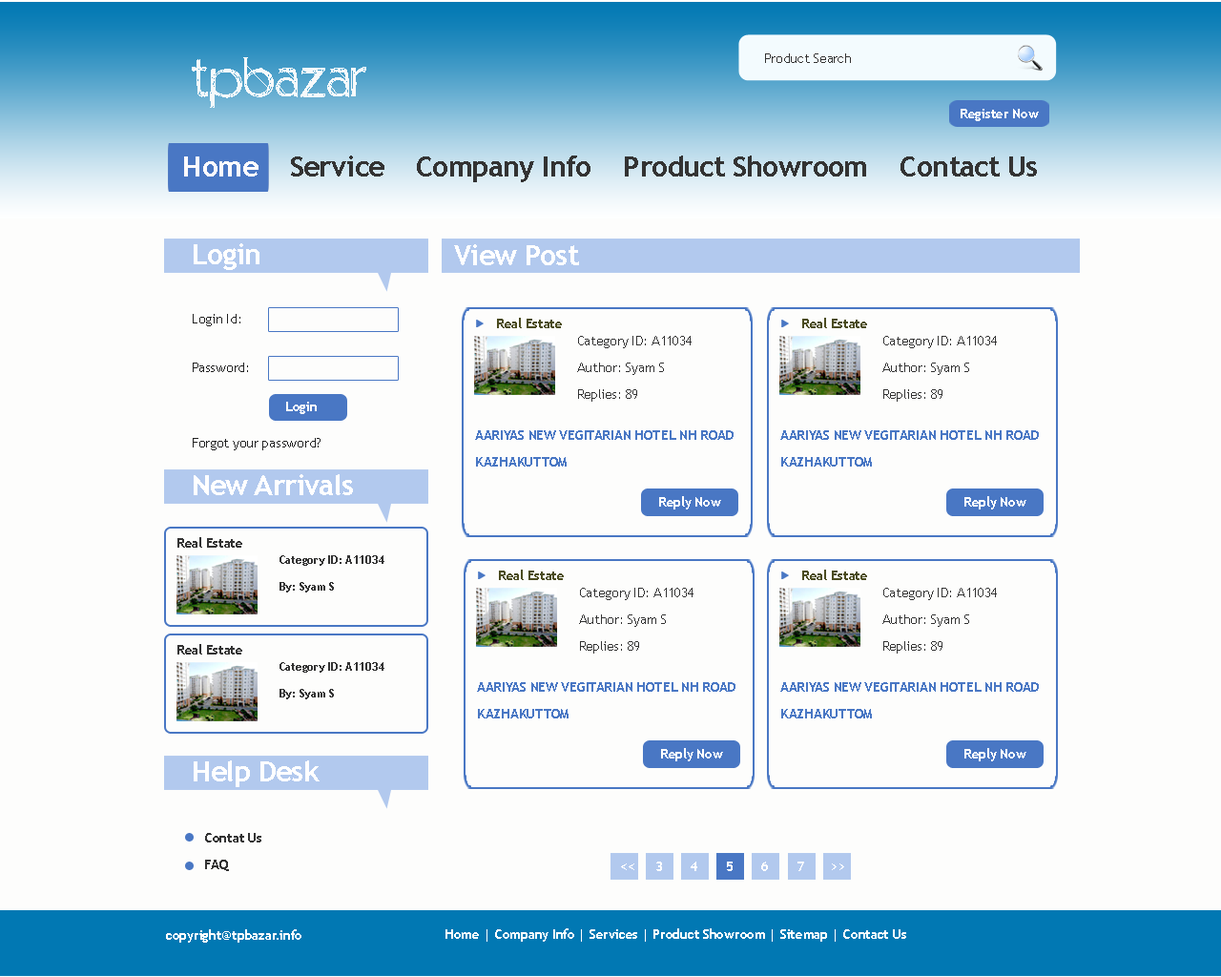
<style>
.page{position:relative;width:1221px;height:977px;background:#fdfdfc}
.page>*{position:absolute;margin:0}
.t1{font:13.4px "TrebuchetMS";letter-spacing:-0.02em;color:#333333}
.t2{font:68.7px "Positiv-A";letter-spacing:-0.02em;color:#f7f9fa}
.t3{font:13.4px "TrebuchetMS-Bold";letter-spacing:-0.02em;color:#ffffff}
.t4{font:28.6px "TrebuchetMS-Bold";letter-spacing:-0.02em;color:#333333}
.t5{font:28.6px "TrebuchetMS-Bold";letter-spacing:-0.02em;color:#fdfafc}
.t6{font:28.6px "TrebuchetMS-Bold";letter-spacing:-0.02em;color:#ffffff}
.t7{font:13.4px "TrebuchetMS";letter-spacing:-0.02em;color:#212121}
.t8{font:13.4px "TrebuchetMS-Bold";letter-spacing:-0.02em;color:#4b4c20}
.t9{font:13.4px/26.7px "TrebuchetMS";letter-spacing:-0.02em;color:#333333}
.t10{font:13.4px "TrebuchetMS-Bold";letter-spacing:-0.02em;color:#fefdfd}
.t11{font:13.4px/26.7px "TrebuchetMS-Bold";letter-spacing:-0.02em;color:#4977c4}
.t12{font:13.4px "TrebuchetMS-Bold";letter-spacing:-0.02em;color:#333333}
.t13{font:11.4px/26.7px "TrebuchetMS-Bold";letter-spacing:-0.02em;color:#333333}
.t14{font:13.4px/26.7px "TrebuchetMS-Bold";letter-spacing:-0.02em;color:#333333}
</style>
<div class="page">
<p class="t1" style="left:765px;top:53px;width:86px;height:10px">Product Search</p>
<p class="t2" style="left:192px;top:57px;width:174px;height:51px">tpbazar</p>
<p class="t3" style="left:960px;top:109px;width:79px;height:12px">Register Now</p>
<p class="t4" style="left:184px;top:155px;width:853px;height:27px"><span class="t5">Home </span>   Service    Company Info    Product Showroom    Contact Us</p>
<p class="t6" style="left:194px;top:243px;width:65px;height:27px">Login</p>
<p class="t6" style="left:454px;top:244px;width:125px;height:21px">View Post</p>
<p class="t7" style="left:193px;top:314px;width:47px;height:12px">Login Id:</p>
<p class="t8" style="left:497px;top:318px;width:65px;height:10px">Real Estate</p>
<p class="t8" style="left:802px;top:318px;width:65px;height:10px">Real Estate</p>
<p class="t9" style="left:577px;top:336px;width:115px;height:66px">Category ID: A11034<br>Author: Syam S<br>Replies: 89</p>
<p class="t9" style="left:882px;top:336px;width:115px;height:66px">Category ID: A11034<br>Author: Syam S<br>Replies: 89</p>
<p class="t7" style="left:193px;top:362px;width:55px;height:10px">Password:</p>
<p class="t10" style="left:286px;top:402px;width:31px;height:12px">Login</p>
<p class="t7" style="left:193px;top:438px;width:127px;height:12px">Forgot your password?</p>
<p class="t11" style="left:475px;top:430px;width:258px;height:36px">AARIYAS NEW VEGITARIAN HOTEL NH ROAD KAZHAKUTTOM</p>
<p class="t11" style="left:780px;top:430px;width:259px;height:36px">AARIYAS NEW VEGITARIAN HOTEL NH ROAD KAZHAKUTTOM</p>
<p class="t6" style="left:194px;top:474px;width:159px;height:21px">New Arrivals</p>
<p class="t3" style="left:659px;top:496px;width:62px;height:13px">Reply Now</p>
<p class="t3" style="left:964px;top:496px;width:62px;height:13px">Reply Now</p>
<p class="t12" style="left:177px;top:537px;width:65px;height:10px">Real Estate</p>
<p class="t13" style="left:279px;top:555px;width:105px;height:37px">Category ID: A11034<br>By: Syam S</p>
<p class="t8" style="left:499px;top:569px;width:65px;height:11px">Real Estate</p>
<p class="t8" style="left:802px;top:569px;width:65px;height:11px">Real Estate</p>
<p class="t9" style="left:579px;top:588px;width:114px;height:65px">Category ID: A11034<br>Author: Syam S<br>Replies: 89</p>
<p class="t9" style="left:882px;top:588px;width:115px;height:65px">Category ID: A11034<br>Author: Syam S<br>Replies: 89</p>
<p class="t12" style="left:177px;top:644px;width:65px;height:10px">Real Estate</p>
<p class="t13" style="left:279px;top:662px;width:105px;height:37px">Category ID: A11034<br>By: Syam S</p>
<p class="t11" style="left:477px;top:682px;width:258px;height:36px">AARIYAS NEW VEGITARIAN HOTEL NH ROAD KAZHAKUTTOM</p>
<p class="t11" style="left:780px;top:682px;width:259px;height:36px">AARIYAS NEW VEGITARIAN HOTEL NH ROAD KAZHAKUTTOM</p>
<p class="t3" style="left:661px;top:748px;width:62px;height:13px">Reply Now</p>
<p class="t3" style="left:964px;top:748px;width:62px;height:13px">Reply Now</p>
<p class="t6" style="left:194px;top:760px;width:126px;height:27px">Help Desk</p>
<p class="t14" style="left:205px;top:833px;width:56px;height:38px">Contat Us<br>FAQ</p>
<p class="t3" style="left:621px;top:863px;width:13px;height:7px">&lt;&lt;</p>
<p class="t3" style="left:656px;top:861px;width:6px;height:10px">3</p>
<p class="t3" style="left:691px;top:861px;width:6px;height:10px">4</p>
<p class="t3" style="left:727px;top:861px;width:6px;height:10px">5</p>
<p class="t3" style="left:761px;top:861px;width:7px;height:10px">6</p>
<p class="t3" style="left:797px;top:861px;width:7px;height:10px">7</p>
<p class="t3" style="left:832px;top:863px;width:12px;height:7px">&gt;&gt;</p>
<p class="t3" style="left:166px;top:929px;width:135px;height:13px">copyright@tpbazar.info</p>
<p class="t3" style="left:445px;top:928px;width:461px;height:13px">Home | Company Info | Services | Product Showroom | Sitemap | Contact Us</p>
</div>
